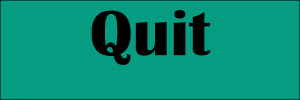
<style>
.page{position:relative;width:300px;height:100px;background:#069c81}
.page>*{position:absolute;margin:0}
.t1{font:66.3px "BritannicBold";color:#000000}
</style>
<div class="page">
<p class="t1" style="left:91px;top:10px;width:120px;height:55px">Quit</p>
</div>
